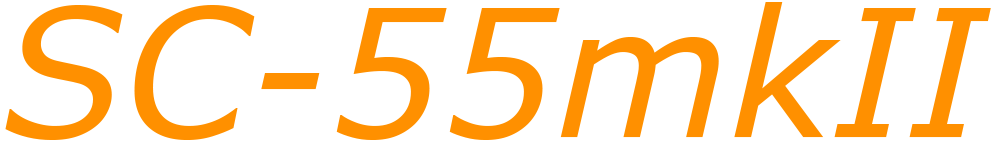
<style>
.page{position:relative;width:992px;height:144px;background:#ffffff}
.page>*{position:absolute;margin:0}
.t1{font:178.5px "Verdana-Italic";color:#ff9000}
</style>
<div class="page">
<p class="t1" style="left:5px;top:2px;width:986px;height:138px">SC-55mkII</p>
</div>
